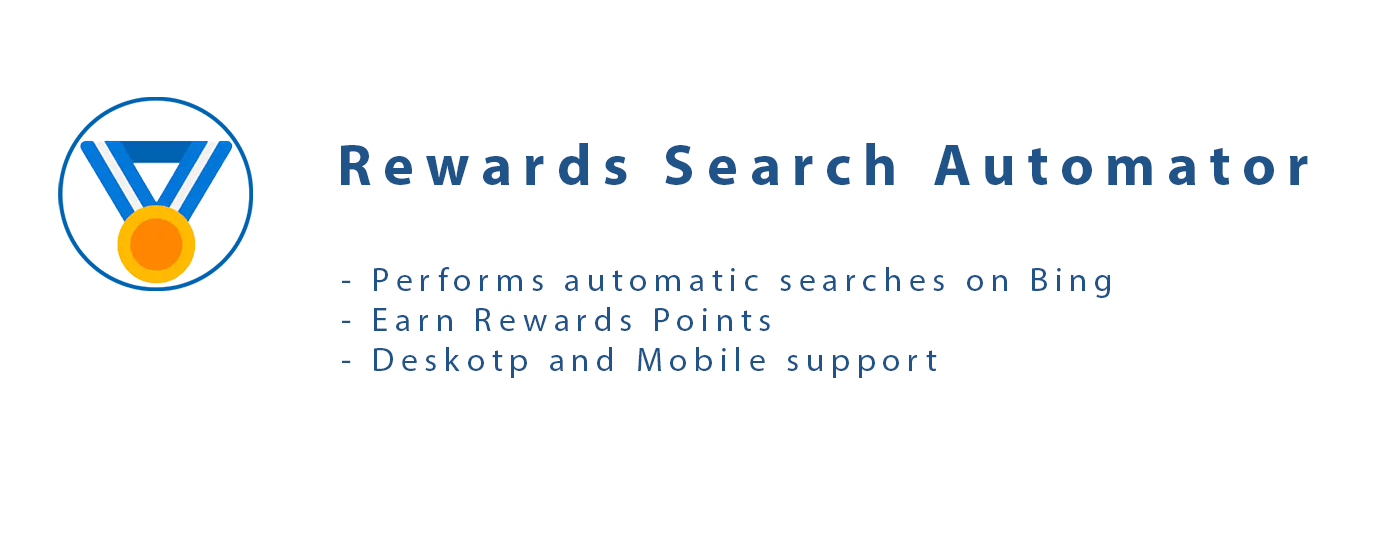
<style>
.page{position:relative;width:1400px;height:560px;background:#ffffff}
.page>*{position:absolute;margin:0}
.t1{font:58.3px "MyriadPro-Bold";letter-spacing:0.2em;color:#205388}
.t2{font:33.3px "MyriadPro-Regular";letter-spacing:0.2em;color:#205388}
</style>
<div class="page">
<p class="t1" style="left:341px;top:143px;width:967px;height:42px">Rewards Search Automator</p>
<p class="t2" style="left:342px;top:267px;width:768px;height:111px">- Performs automatic searches on Bing<br>- Earn Rewards Points<br>- Deskotp and Mobile support</p>
</div>
